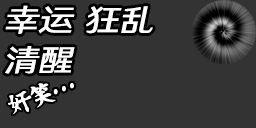
<style>
.page{position:relative;width:256px;height:128px;background:#333333}
.page>*{position:absolute;margin:0}
.t1{font:31px "HYWenHei-FEW";letter-spacing:-0.015em;color:#ffffff;font-style:italic;scale:1.13 1}
</style>
<div class="page">
<p class="t1" style="left:5px;top:5px;width:70px;height:29px">幸运</p>
<p class="t1" style="left:86px;top:6px;width:67px;height:28px">狂乱</p>
<p class="t1" style="left:5px;top:46px;width:70px;height:28px">清醒</p>
</div>
